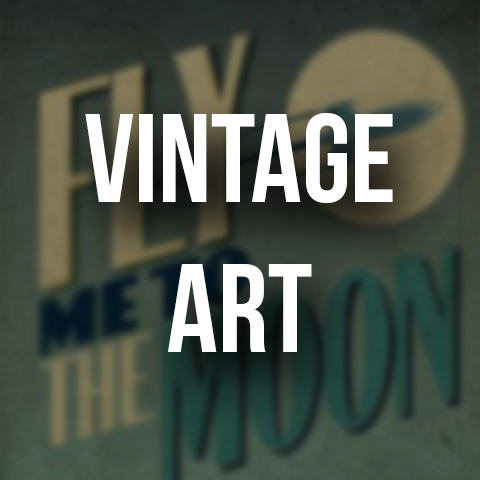
<style>
.page{position:relative;width:480px;height:480px}
.page>*{position:absolute;margin:0}
.t1{font:125px "BebasNeue";color:#ffffff}
</style>
<div class="page">
<p class="t1" style="left:85px;top:113px;width:308px;height:239px;text-align:center">vintage<br>art</p>
</div>
